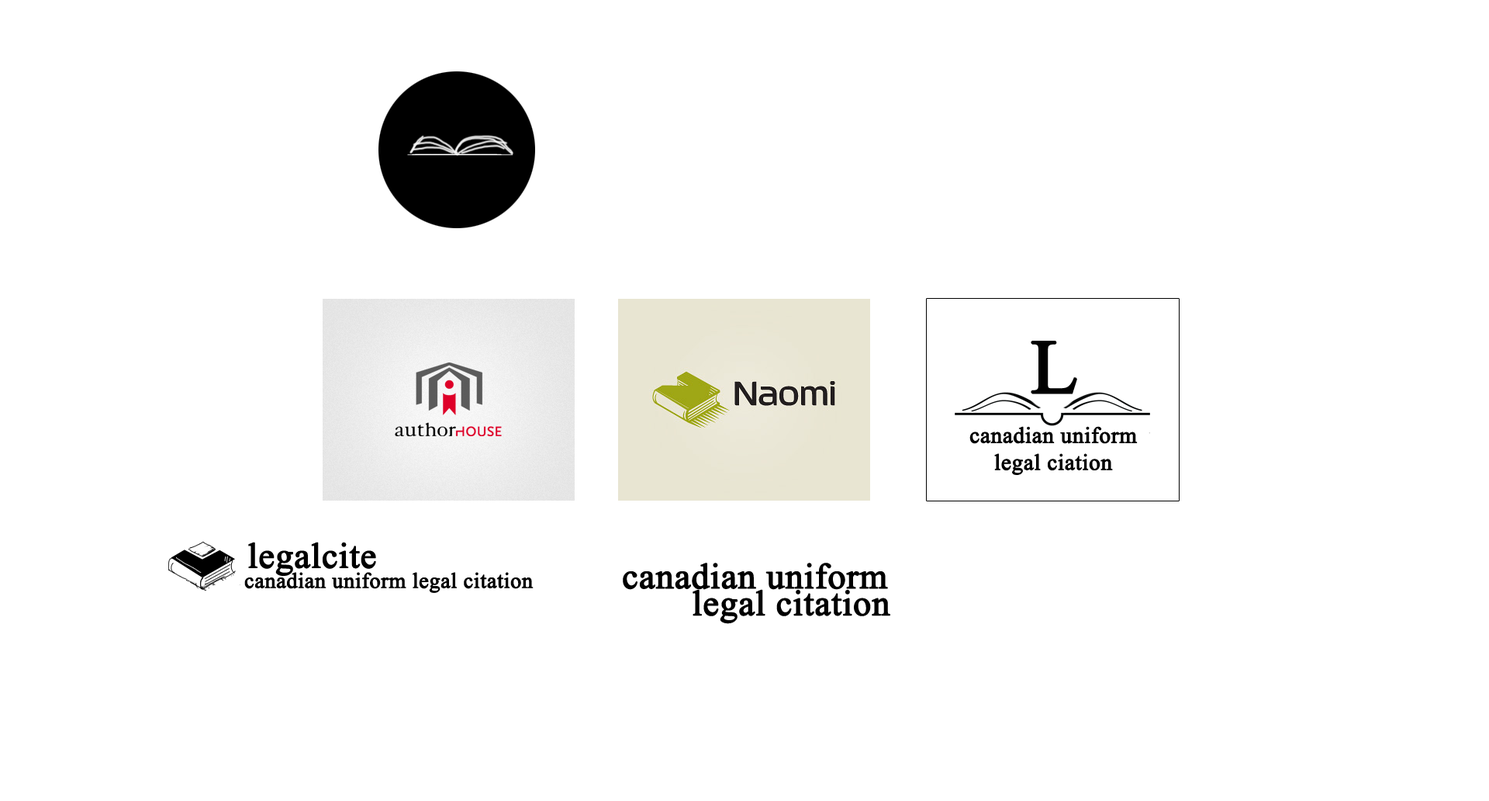
<style>
.page{position:relative;width:1489px;height:801px;background:#ffffff}
.page>*{position:absolute;margin:0}
.t1{font:76.8px "TimesNewRomanPSMT";color:#000000;font-weight:bold}
.t2{font:22.5px "TimesNewRomanPSMT";color:#000000;font-weight:bold}
.t3{font:35.7px "TimesNewRomanPSMT";color:#000000;font-weight:bold}
.t4{font:21.7px "TimesNewRomanPSMT";color:#000000;font-weight:bold}
</style>
<div class="page">
<p class="t1" style="left:1031px;top:341px;width:47px;height:53px">L</p>
<p class="t2" style="left:970px;top:426px;width:168px;height:49px;text-align:center">canadian uniform legal ciation</p>
<p class="t3" style="left:248px;top:541px;width:128px;height:35px">legalcite</p>
<p class="t3" style="left:623px;top:562px;width:265px;height:28px">canadian uniform</p>
<p class="t4" style="left:244px;top:572px;width:290px;height:21px">canadian uniform legal citation</p>
<p class="t3" style="left:693px;top:589px;width:198px;height:35px">legal citation</p>
</div>
